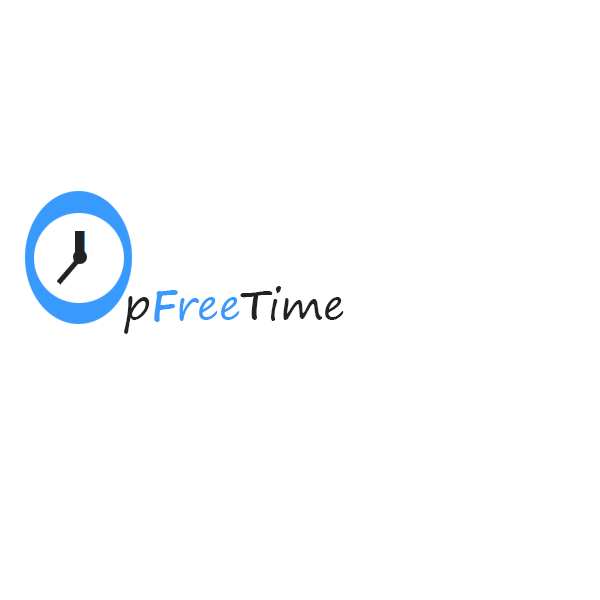
<style>
.page{position:relative;width:600px;height:600px;background:#ffffff}
.page>*{position:absolute;margin:0}
.t1{font:41.7px "SegoePrint";color:#399afd}
.t2{font:41.7px "SegoePrint";color:#222222}
.t3{font:41.7px "SegoePrint-Bold";color:#399afd}
.t4{font:41.7px "SegoePrint-Bold";color:#222222}
</style>
<div class="page">
<p class="t1" style="left:124px;top:286px;width:220px;height:48px"><span class="t2">p</span><span class="t3">F</span>ree<span class="t4">T</span><span class="t2">ime</span></p>
</div>
